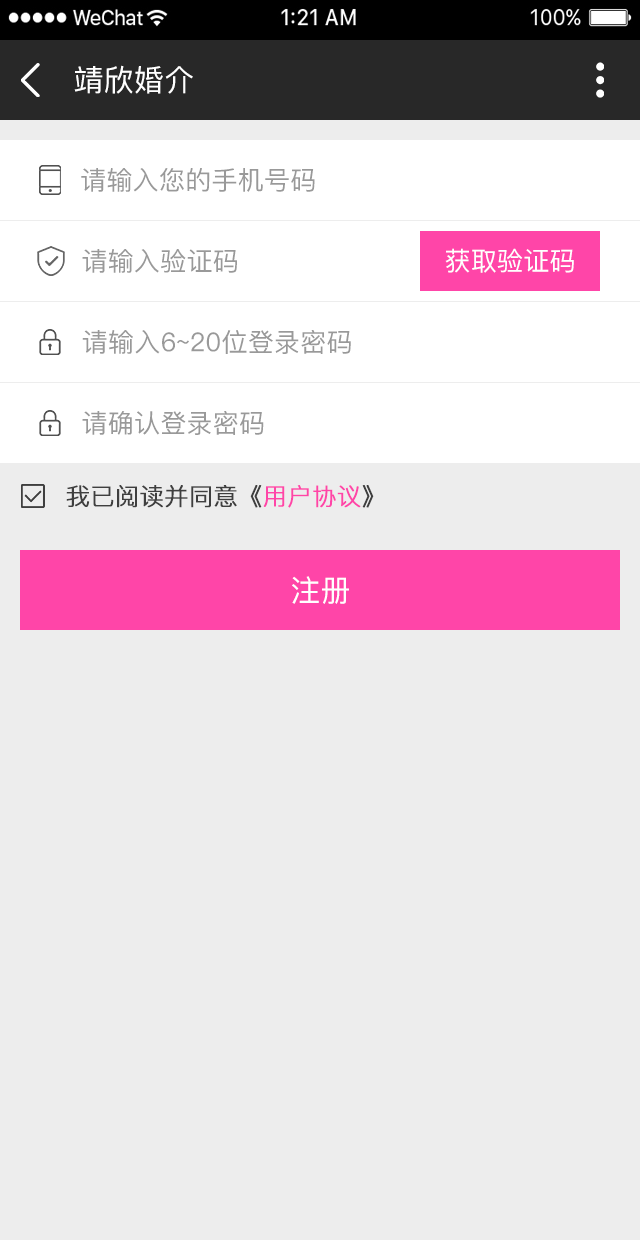
<style>
.page{position:relative;width:640px;height:1240px;background:#ededed}
.page>*{position:absolute;margin:0}
.t1{font:30px "PingFang-SC-Medium";letter-spacing:0.01em;color:#ffffff;text-transform:uppercase}
.t2{font:26px "PingFang-SC-Medium";letter-spacing:0.01em;color:#999999;text-transform:uppercase}
.t3{font:26px "PingFang-SC-Medium";letter-spacing:0.01em;color:#ffffff;text-transform:uppercase}
.t4{font:24px "PingFang-SC-Regular";color:#3f3f3f;text-transform:uppercase;font-weight:bold}
.t5{font:24px "PingFang-SC-Regular";color:#ff45a8;text-transform:uppercase;font-weight:bold}
</style>
<div class="page">
<p class="t1" style="left:74px;top:65px;width:119px;height:29px">靖欣婚介</p>
<p class="t2" style="left:81px;top:168px;width:234px;height:24px">请输入您的手机号码</p>
<p class="t2" style="left:82px;top:249px;width:155px;height:24px">请输入验证码</p>
<p class="t3" style="left:445px;top:248px;width:129px;height:25px">获取验证码</p>
<p class="t2" style="left:82px;top:330px;width:269px;height:24px">请输入6~20位登录密码</p>
<p class="t2" style="left:82px;top:411px;width:182px;height:24px">请确认登录密码</p>
<p class="t4" style="left:66px;top:485px;width:308px;height:23px">我已阅读并同意《<span class="t5">用户协议</span>》</p>
<p class="t1" style="left:292px;top:576px;width:57px;height:28px">注册</p>
</div>
